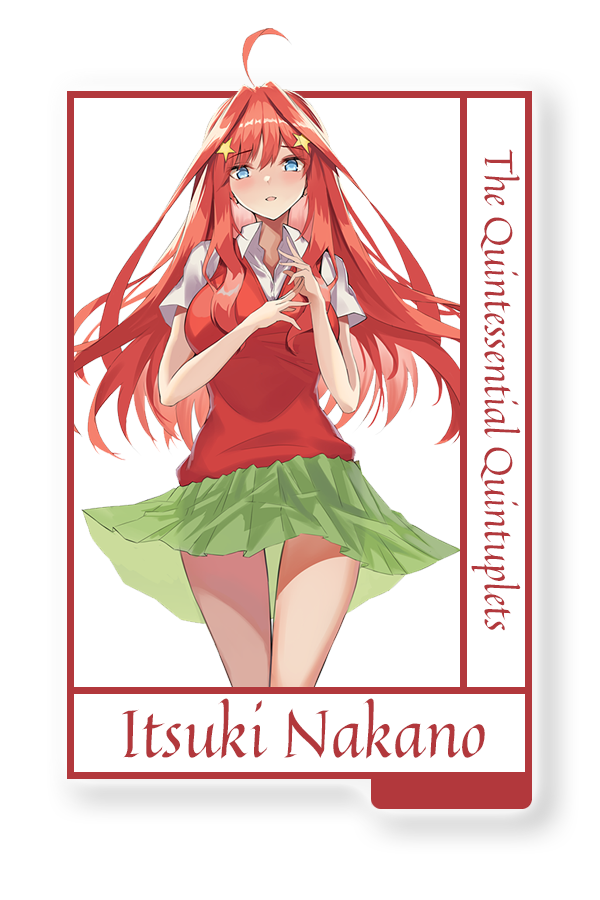
<style>
.page{position:relative;width:600px;height:900px;background:#ffffff}
.page>*{position:absolute;margin:0}
.t1{font:39px "Quintessential-Regular";color:#b2383c}
.t2{font:65.2px "Quintessential-Regular";color:#b2383c}
</style>
<div class="page">
<p class="t1" style="left:471px;top:149px;width:50px;height:482px;rotate:90deg">The Quintessential Quintuplets</p>
<p class="t2" style="left:122px;top:698px;width:363px;height:61px">Itsuki Nakano</p>
</div>
